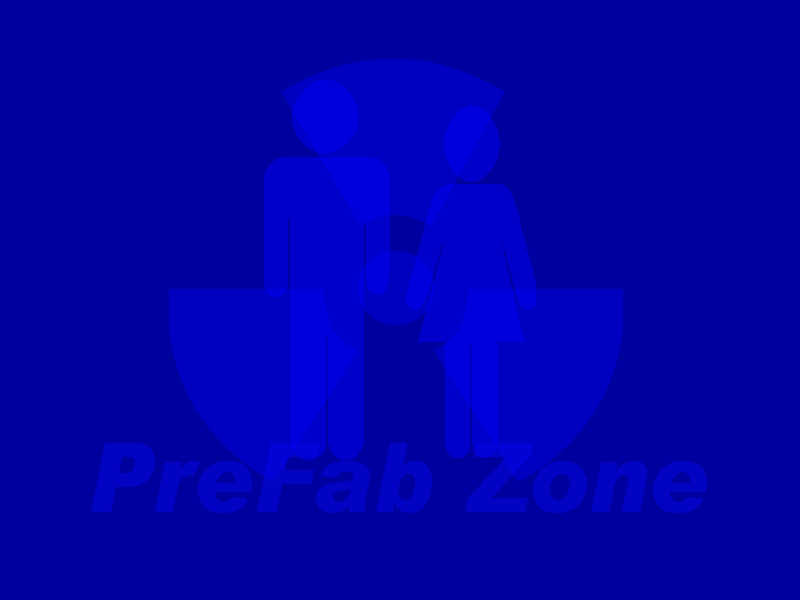
<style>
.page{position:relative;width:800px;height:600px;background:#00009f}
.page>*{position:absolute;margin:0}
.t1{font:95.5px "Arial-BlackItalic";color:#0303c4;scale:0.94 1}
</style>
<div class="page">
<p class="t1" style="left:91px;top:443px;width:616px;height:70px">PreFab Zone</p>
</div>
